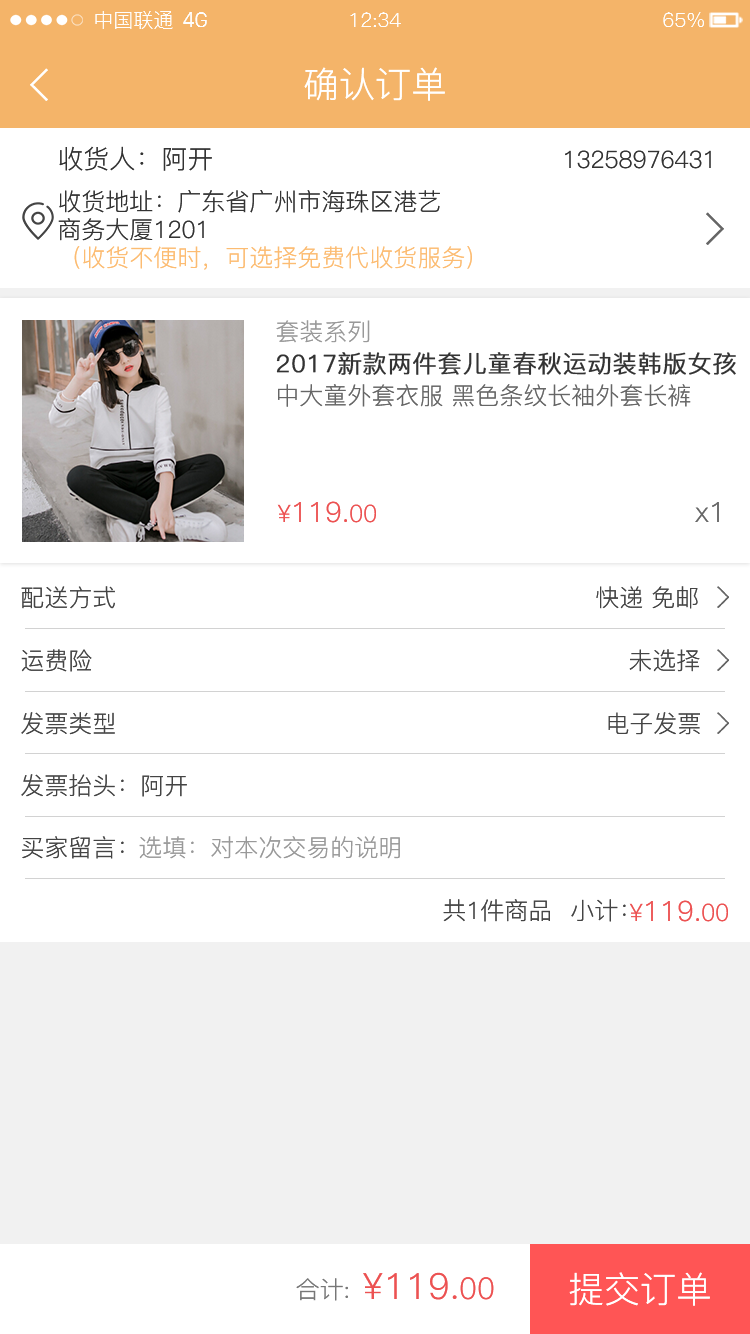
<style>
.page{position:relative;width:750px;height:1334px;background:#ffffff}
.page>*{position:absolute;margin:0}
.t1{font:20px "PingFang-SC-Regular";color:#fefefe}
.t2{font:20px "SanFranciscoDisplay";color:#fefefe}
.t3{font:36px "PingFang-SC-Regular";color:#ffffff}
.t4{font:26px "PingFang-SC-Regular";color:#333333}
.t5{font:24px "PingFang-SC-Regular";color:#333333}
.t6{font:24px/28px "PingFang-SC-Regular";color:#333333}
.t7{font:24px "PingFang-SC-Regular";color:#fcbc72}
.t8{font:24px "PingFang-SC-Regular";color:#999999}
.t9{font:24px "PingFang-SC-Regular";color:#333333;font-weight:bold}
.t10{font:24px "PingFang-SC-Regular";color:#666666}
.t11{font:28px "PingFang-SC-Regular";color:#ec5252}
.t12{font:24px "PingFang-SC-Regular";color:#ec5252}
.t13{font:28px "PingFang-SC-Regular";color:#666666}
.t14{font:24px "PingFang-SC-Regular";color:#444444}
.t15{font:24px "PingFang-SC-Regular";color:#777777}
.t16{font:36px "PingFang-SC-Regular";color:#ec5252}
.t17{font:30px "PingFang-SC-Regular";color:#ec5252}
</style>
<div class="page">
<p class="t1" style="left:95px;top:11px;width:78px;height:18px">中国联通</p>
<p class="t2" style="left:183px;top:12px;width:24px;height:15px">4G</p>
<p class="t1" style="left:350px;top:12px;width:51px;height:15px">12:34</p>
<p class="t1" style="left:663px;top:12px;width:41px;height:15px">65%</p>
<p class="t3" style="left:304px;top:67px;width:141px;height:34px">确认订单</p>
<p class="t4" style="left:59px;top:146px;width:153px;height:25px">收货人：阿开</p>
<p class="t5" style="left:565px;top:150px;width:146px;height:19px">13258976431</p>
<p class="t6" style="left:58px;top:190px;width:382px;height:51px">收货地址：广东省广州市海珠区港艺<br>商务大厦1201</p>
<p class="t7" style="left:74px;top:246px;width:398px;height:24px">（收货不便时，可选择免费代收货服务）</p>
<p class="t8" style="left:276px;top:320px;width:94px;height:23px">套装系列</p>
<p class="t9" style="left:276px;top:352px;width:460px;height:23px">2017新款两件套儿童春秋运动装韩版女孩</p>
<p class="t10" style="left:278px;top:384px;width:413px;height:23px">中大童外套衣服 黑色条纹长袖外套长裤</p>
<p class="t11" style="left:277px;top:501px;width:99px;height:22px"><span class="t12">¥</span>119.<span class="t12">00</span></p>
<p class="t13" style="left:695px;top:502px;width:24px;height:20px">x1</p>
<p class="t14" style="left:21px;top:586px;width:94px;height:23px">配送方式</p>
<p class="t14" style="left:596px;top:586px;width:102px;height:23px">快递 免邮</p>
<p class="t14" style="left:21px;top:649px;width:71px;height:23px">运费险</p>
<p class="t14" style="left:629px;top:649px;width:71px;height:23px">未选择</p>
<p class="t14" style="left:21px;top:712px;width:94px;height:23px">发票类型</p>
<p class="t14" style="left:608px;top:712px;width:92px;height:23px">电子发票</p>
<p class="t14" style="left:21px;top:774px;width:166px;height:23px">发票抬头：阿开</p>
<p class="t14" style="left:22px;top:836px;width:102px;height:23px">买家留言：</p>
<p class="t8" style="left:139px;top:836px;width:261px;height:23px">选填：对本次交易的说明</p>
<p class="t14" style="left:443px;top:899px;width:107px;height:23px">共1件商品</p>
<p class="t14" style="left:571px;top:899px;width:55px;height:23px">小计：</p>
<p class="t11" style="left:629px;top:900px;width:99px;height:22px"><span class="t12">¥</span>119.<span class="t12">00</span></p>
<p class="t15" style="left:296px;top:1278px;width:52px;height:23px">合计:</p>
<p class="t16" style="left:363px;top:1272px;width:131px;height:28px">¥119.<span class="t17">00</span></p>
<p class="t3" style="left:569px;top:1272px;width:141px;height:34px">提交订单</p>
</div>
